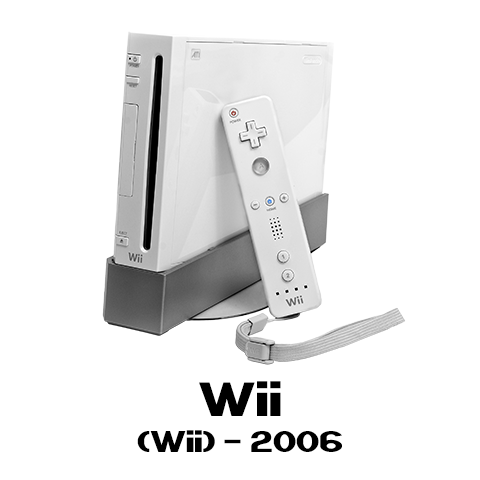
<style>
.page{position:relative;width:480px;height:480px;background:#ffffff}
.page>*{position:absolute;margin:0}
.t1{font:30px "Nintender";color:#000000}
.t2{font:48px "Nintender";color:#000000}
</style>
<div class="page">
<p class="t1" style="left:137px;top:381px;width:205px;height:71px;text-align:center"><span class="t2">Wii<br></span>(Wii) - 2006</p>
</div>
